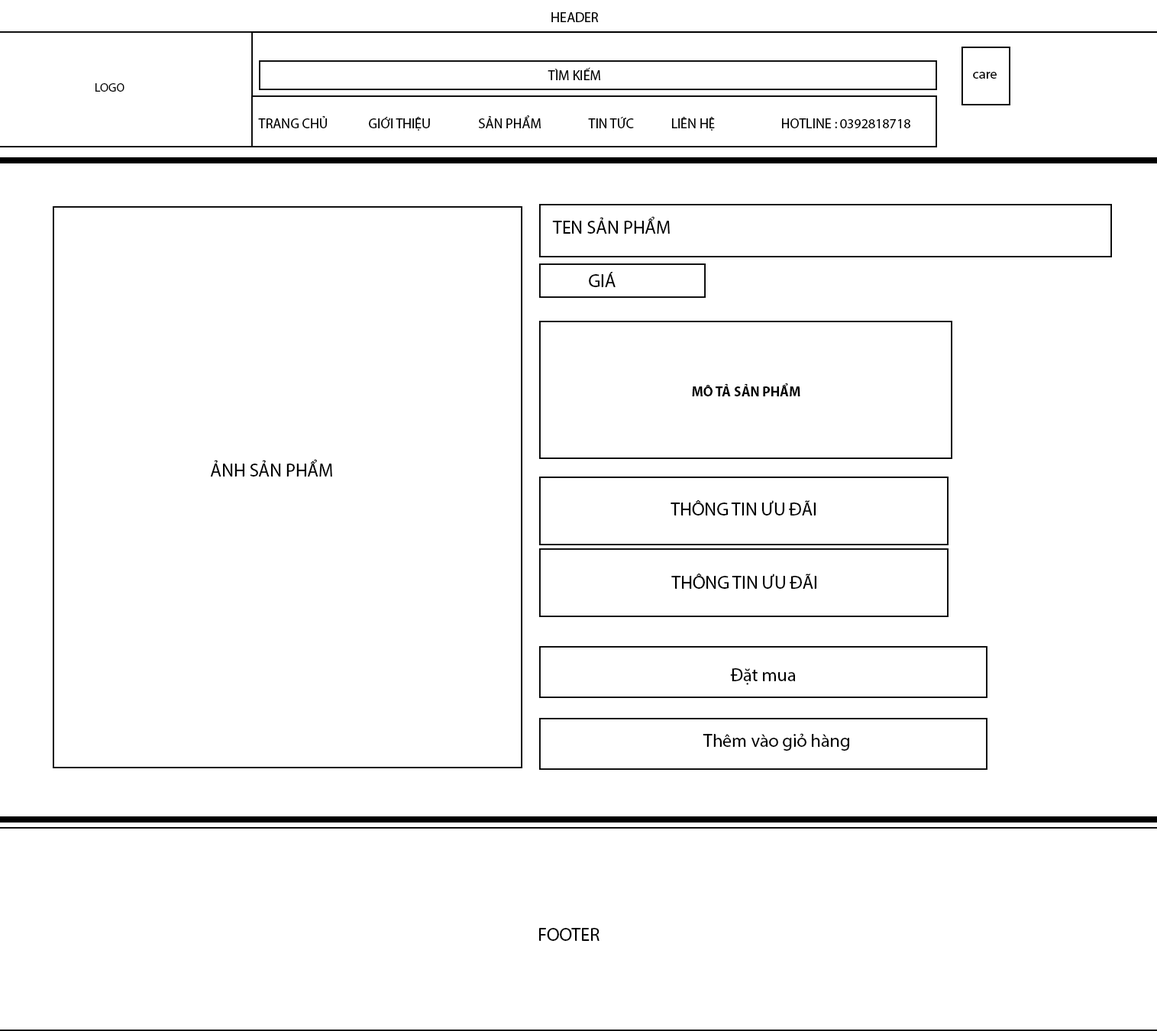
<style>
.page{position:relative;width:1157px;height:1031px;background:#ffffff}
.page>*{position:absolute;margin:0}
.t1{font:13.7px "MyriadPro-Regular";color:#000000}
.t2{font:12.2px "MyriadPro-Regular";color:#000000}
.t3{font:18.3px "MyriadPro-Regular";color:#000000}
.t4{font:13.7px "MyriadPro-Bold";color:#000000}
.t5{font:18.3px "MyriadPro-Regular";color:#000000;text-transform:uppercase}
</style>
<div class="page">
<p class="t1" style="left:551px;top:12px;width:48px;height:10px">HEADER</p>
<p class="t1" style="left:547px;top:67px;width:53px;height:13px">TÌM KIẾM</p>
<p class="t1" style="left:973px;top:72px;width:23px;height:7px">care</p>
<p class="t2" style="left:95px;top:83px;width:29px;height:9px">LOGO</p>
<p class="t1" style="left:258px;top:115px;width:652px;height:16px">TRANG CHỦ   GIỚI THIỆU  SẢN PHẨM   TIN TỨC  LIÊN HỆ   HOTLINE : 0392818718</p>
<p class="t3" style="left:552px;top:216px;width:118px;height:18px">TEN SẢN PHẨM</p>
<p class="t3" style="left:589px;top:272px;width:26px;height:15px">GIÁ</p>
<p class="t4" style="left:692px;top:383px;width:108px;height:13px">MÔ TẢ SẢN PHẨM</p>
<p class="t3" style="left:210px;top:459px;width:122px;height:17px">ẢNH SẢN PHẨM</p>
<p class="t3" style="left:670px;top:500px;width:145px;height:15px">THÔNG TIN ƯU ĐÃI</p>
<p class="t3" style="left:671px;top:573px;width:145px;height:16px">THÔNG TIN ƯU ĐÃI</p>
<p class="t3" style="left:702px;top:668px;width:147px;height:83px">Đặt mua<br><br><br>Thêm vào giỏ hàng</p>
<p class="t5" style="left:539px;top:928px;width:60px;height:13px">footer</p>
</div>
